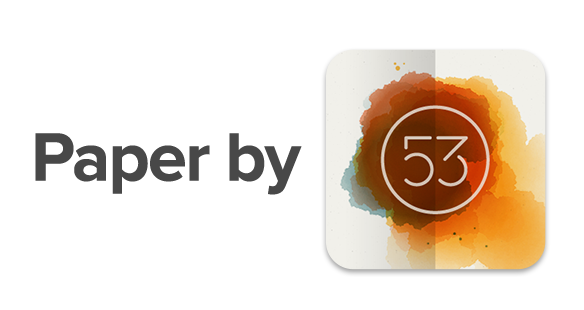
<style>
.page{position:relative;width:584px;height:310px;background:#ffffff}
.page>*{position:absolute;margin:0}
.t1{font:70.7px "ProximaNova-Bold";letter-spacing:-0.025em;color:#484848}
</style>
<div class="page">
<p class="t1" style="left:35px;top:133px;width:267px;height:62px">Paper by</p>
</div>
